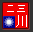
<style>
.page{position:relative;width:33px;height:32px;background:#f20000}
.page>*{position:absolute;margin:0}
.t1{font:10.4px "SimSun";color:#ffffff}
.t2{font:11.7px "SimSun";color:#ffffff}
</style>
<div class="page">
<p class="t1" style="left:7px;top:5px;width:18px;height:7px">二三</p>
<p class="t2" style="left:16px;top:15px;width:11px;height:12px">川</p>
</div>
